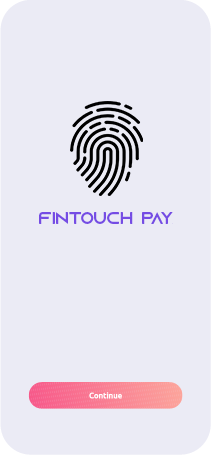
<style>
.page{position:relative;width:211px;height:455px;background:#ebebf5}
.page>*{position:absolute;margin:0}
.t1{font:16.7px "AzonixRegular";color:#754ce4}
</style>
<div class="page">
<p class="t1" style="left:39px;top:212px;width:134px;height:12px">FINTOUCH PAY</p>
</div>
